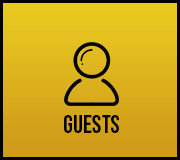
<style>
.page{position:relative;width:180px;height:160px}
.page>*{position:absolute;margin:0}
.t1{font:25px "BebasNeue-Regular";color:#000000}
</style>
<div class="page">
<p class="t1" style="left:64px;top:115px;width:55px;height:18px">guests</p>
</div>
